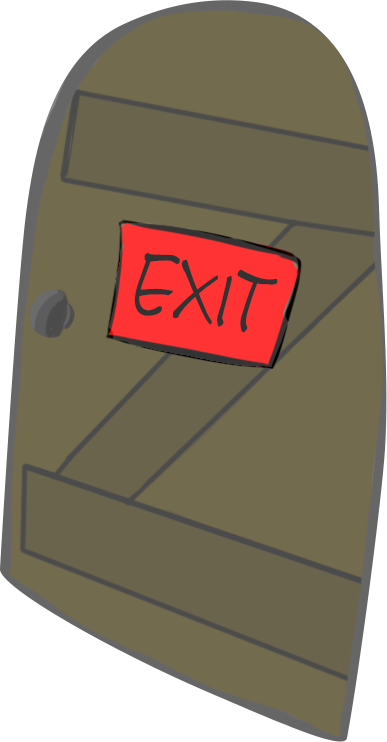
<style>
.page{position:relative;width:387px;height:742px;background:#726b4e}
.page>*{position:absolute;margin:0}
.t1{font:83.9px "Calvin";color:#333333;scale:0.71 1}
</style>
<div class="page">
<p class="t1" style="left:134px;top:252px;width:144px;height:81px;rotate:12deg">EXIT</p>
</div>
